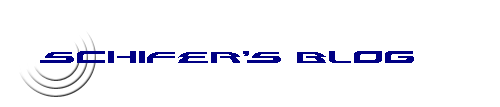
<style>
.page{position:relative;width:500px;height:107px;background:#ffffff}
.page>*{position:absolute;margin:0}
.t1{font:35px "AlexisExpanded";color:#000084}
</style>
<div class="page">
<p class="t1" style="left:40px;top:51px;width:374px;height:12px">SCHIFER’S BLOG</p>
</div>
